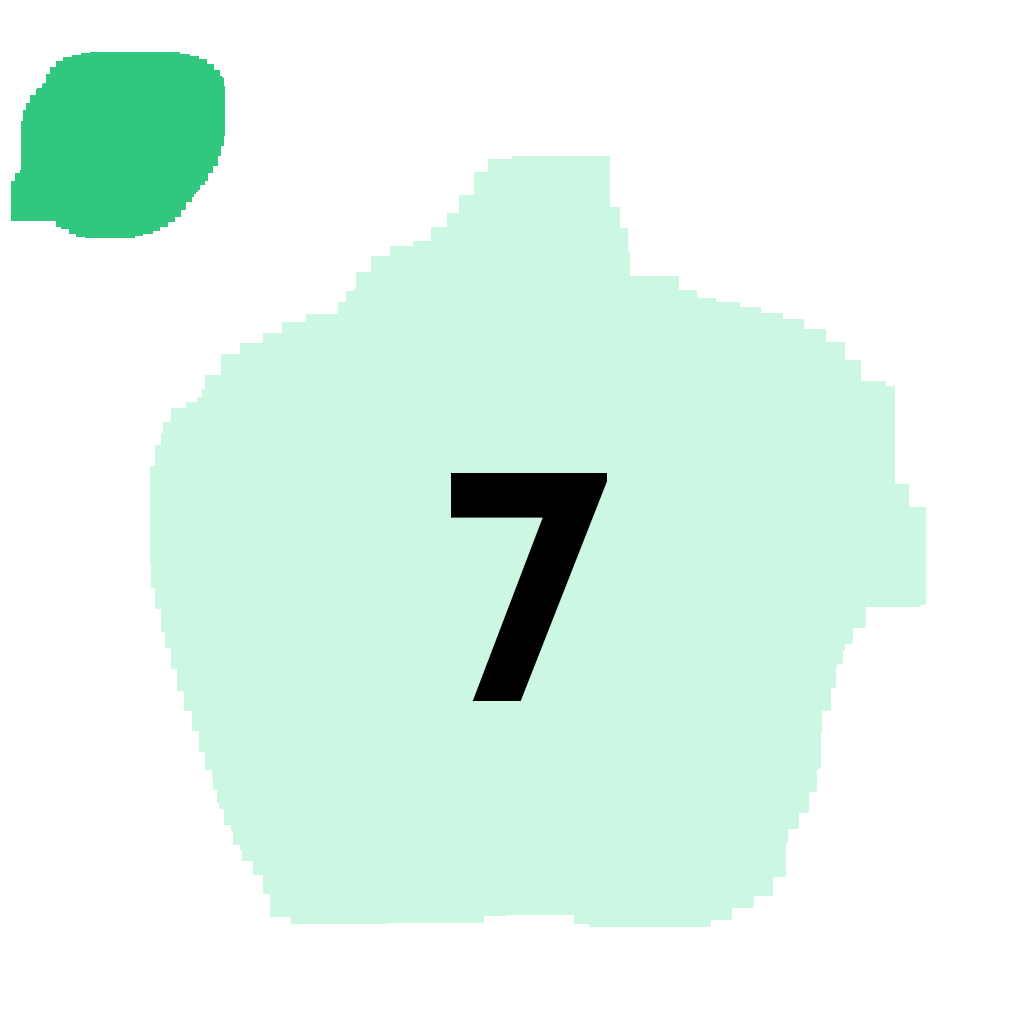
<style>
.page{position:relative;width:1024px;height:1024px;background:#ffffff}
.page>*{position:absolute;margin:0}
.t1{font:290px "LEMONMILK-Medium";color:#000000}
</style>
<div class="page">
<p class="t1" style="left:451px;top:473px;width:156px;height:228px">7</p>
</div>
